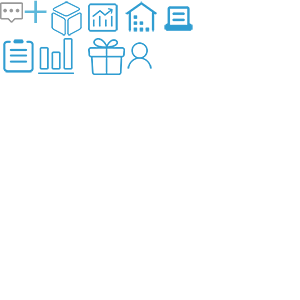
<style>
.page{position:relative;width:300px;height:300px;background:#ffffff}
.page>*{position:absolute;margin:0}
.t1{font:42px "MyriadPro-Regular";color:#5db8da}
</style>
<div class="page">
<p class="t1" style="left:24px;top:0px;width:23px;height:23px">+</p>
</div>
